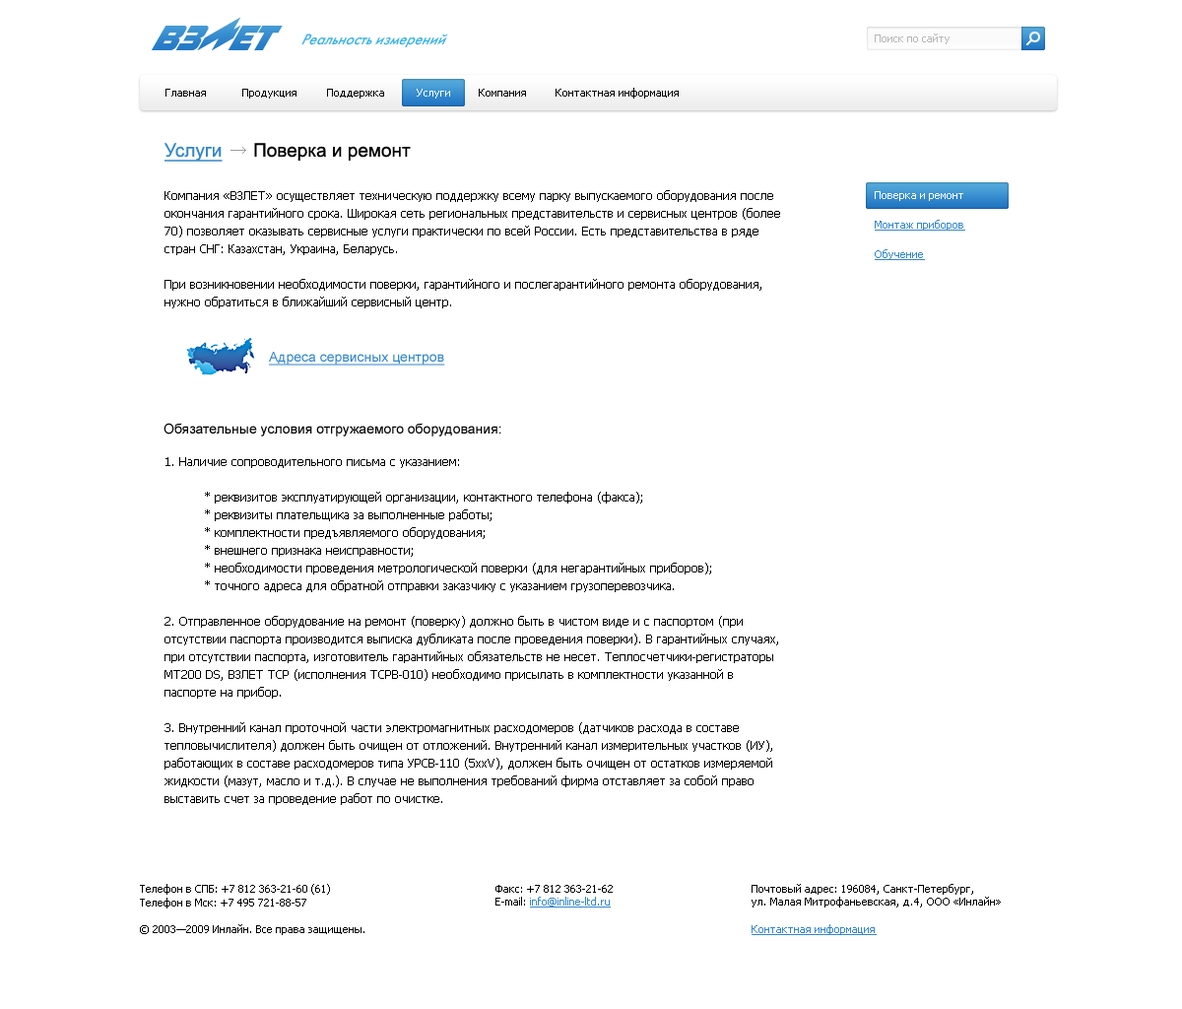
<style>
.page{position:relative;width:1182px;height:1009px;background:#ffffff}
.page>*{position:absolute;margin:0}
.t1{font:15.7px "FuturisC-Italic";color:#3cb3e8;scale:0.94 1}
.t2{font:10.8px "Tahoma";color:#b7b6b6}
.t3{font:10.8px "Tahoma";color:#000000}
.t4{font:10.8px "Tahoma";color:#ffffff}
.t5{font:18.7px "ArialMT";color:#000000}
.t6{font:18.7px "ArialMT";color:#3287cc;text-decoration:underline}
.t7{font:11.8px/17.7px "Tahoma";color:#000000}
.t8{font:13.8px "ArialMT";color:#3287cc;text-decoration:underline}
.t9{font:13.8px "ArialMT";color:#000000}
.t10{font:14.8px "Arial-BoldMT";color:#000000}
.t11{font:10.8px "Tahoma";color:#3287cc;text-decoration:underline}
</style>
<div class="page">
<p class="t1" style="left:301px;top:33px;width:147px;height:14px">Реальность измерений</p>
<p class="t2" style="left:875px;top:33px;width:75px;height:11px">Поиск по сайту</p>
<p class="t3" style="left:165px;top:89px;width:41px;height:8px">Главная</p>
<p class="t3" style="left:242px;top:89px;width:55px;height:10px">Продукция</p>
<p class="t3" style="left:327px;top:89px;width:57px;height:10px">Поддержка</p>
<p class="t4" style="left:417px;top:89px;width:33px;height:10px">Услуги</p>
<p class="t3" style="left:479px;top:89px;width:47px;height:8px">Компания</p>
<p class="t3" style="left:556px;top:88px;width:123px;height:11px">Контактная информация</p>
<p class="t5" style="left:165px;top:143px;width:246px;height:19px"><span class="t6">Услуги</span>      Поверка и ремонт</p>
<p class="t7" style="left:165px;top:190px;width:615px;height:615px">Компания «ВЗЛЕТ» осуществляет техническую поддержку всему парку выпускаемого оборудования после окончания гарантийного срока. Широкая сеть региональных представительств и сервисных центров (более 70) позволяет оказывать сервисные услуги практически по всей России. Есть представительства в ряде стран СНГ: Казахстан, Украина, Беларусь.<br><br>При возникновении необходимости поверки, гарантийного и послегарантийного ремонта оборудования, нужно обратиться в ближайший сервисный центр.<br><br><br><br><br><br><br><br><br>1. Наличие сопроводительного письма с указанием:<br><br>          * реквизитов эксплуатирующей организации, контактного телефона (факса);<br>          * реквизиты плательщика за выполненные работы;<br>          * комплектности предъявляемого оборудования;<br>          * внешнего признака неисправности;<br>          * необходимости проведения метрологической поверки (для негарантийных приборов);<br>          * точного адреса для обратной отправки заказчику с указанием грузоперевозчика.<br><br>2. Отправленное оборудование на ремонт (поверку) должно быть в чистом виде и с паспортом (при отсутствии паспорта производится выписка дубликата после проведения поверки). В гарантийных случаях, при отсутствии паспорта, изготовитель гарантийных обязательств не несет. Теплосчетчики-регистраторы МТ200 DS, ВЗЛЕТ ТСР (исполнения ТСРВ-010) необходимо присылать в комплектности указанной в паспорте на прибор.<br><br>3. Внутренний канал проточной части электромагнитных расходомеров (датчиков расхода в составе тепловычислителя) должен быть очищен от отложений. Внутренний канал измерительных участков (ИУ), работающих в составе расходомеров типа УРСВ-110 (5xxV), должен быть очищен от остатков измеряемой жидкости (мазут, масло и т.д.). В случае не выполнения требований фирма отставляет за собой право выставить счет за проведение работ по очистке.</p>
<p class="t8" style="left:269px;top:352px;width:176px;height:13px">Адреса сервисных центров</p>
<p class="t9" style="left:164px;top:423px;width:337px;height:13px">Обязательные условия отгружаемого оборудования:</p>
<p class="t3" style="left:140px;top:884px;width:190px;height:24px">Телефон в СПБ: +7 812 363-21-60 (61)<br>Телефон в Мск: +7 495 721-88-57</p>
<p class="t3" style="left:496px;top:885px;width:117px;height:22px"><span class="t10"><br><br></span>Факс: +7 812 363-21-62<br>E-mail: <span class="t11">info@inline-ltd.ru</span></p>
<p class="t3" style="left:752px;top:884px;width:249px;height:23px"><span class="t10"><br><br></span>Почтовый адрес: 196084, Санкт-Петербург,<br>ул. Малая Митрофаньевская, д.4, ООО «Инлайн»</p>
<p class="t3" style="left:140px;top:924px;width:224px;height:11px">© 2003—2009 Инлайн. Все права защищены.</p>
<p class="t11" style="left:752px;top:924px;width:125px;height:11px">Контактная информация</p>
</div>
